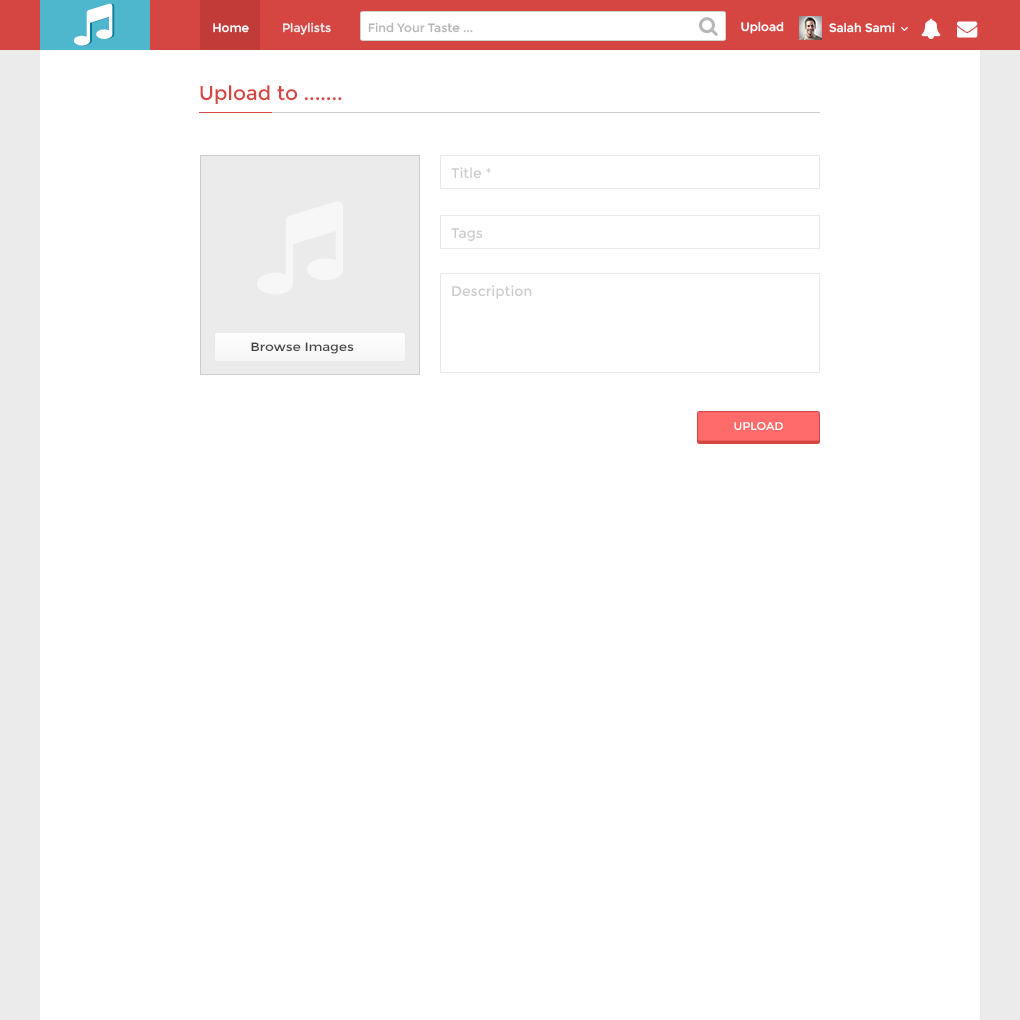
<style>
.page{position:relative;width:1020px;height:1020px;background:#ffffff}
.page>*{position:absolute;margin:0}
.t1{font:12px "Montserrat-Regular";color:#ffffff}
.t2{font:12px "Montserrat-Regular";color:#ebebeb}
.t3{font:12px "Montserrat-Regular";color:#b7b7b7}
.t4{font:20px "Montserrat-Regular";color:#d54542}
.t5{font:14px "Montserrat-Regular";color:#cccccc}
.t6{font:12px "Montserrat-Regular";color:#444444;scale:1.12 1}
.t7{font:11.4px "Montserrat-Regular";color:#ffffff;text-transform:uppercase}
</style>
<div class="page">
<p class="t1" style="left:213px;top:23px;width:36px;height:10px">Home</p>
<p class="t2" style="left:283px;top:22px;width:48px;height:13px">Playlists</p>
<p class="t3" style="left:368px;top:22px;width:105px;height:11px">Find Your Taste ...</p>
<p class="t1" style="left:741px;top:21px;width:43px;height:13px">Upload</p>
<p class="t1" style="left:829px;top:22px;width:66px;height:11px">Salah Sami</p>
<p class="t4" style="left:200px;top:85px;width:142px;height:19px">Upload to .......</p>
<p class="t5" style="left:451px;top:167px;width:40px;height:11px">Title *</p>
<p class="t5" style="left:451px;top:228px;width:32px;height:13px">Tags</p>
<p class="t5" style="left:452px;top:285px;width:80px;height:14px">Description</p>
<p class="t6" style="left:251px;top:342px;width:103px;height:12px">Browse Images</p>
<p class="t7" style="left:734px;top:422px;width:49px;height:8px">upload</p>
</div>
